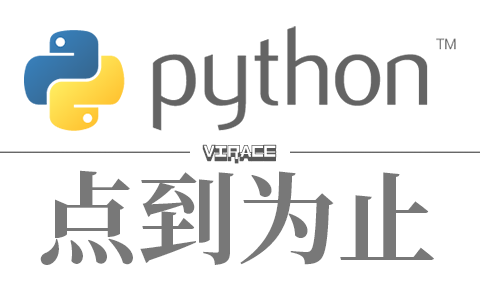
<style>
.page{position:relative;width:480px;height:290px;background:#ffffff}
.page>*{position:absolute;margin:0}
.t1{font:12.5px "RaseGPL-Outline";color:#585858}
.t2{font:100px "SourceHanSerifSC-Bold";color:#646464}
</style>
<div class="page">
<p class="t1" style="left:202px;top:144px;width:75px;height:20px">VIRACE</p>
<p class="t2" style="left:40px;top:170px;width:394px;height:95px;opacity:0.9">点到为止</p>
</div>
